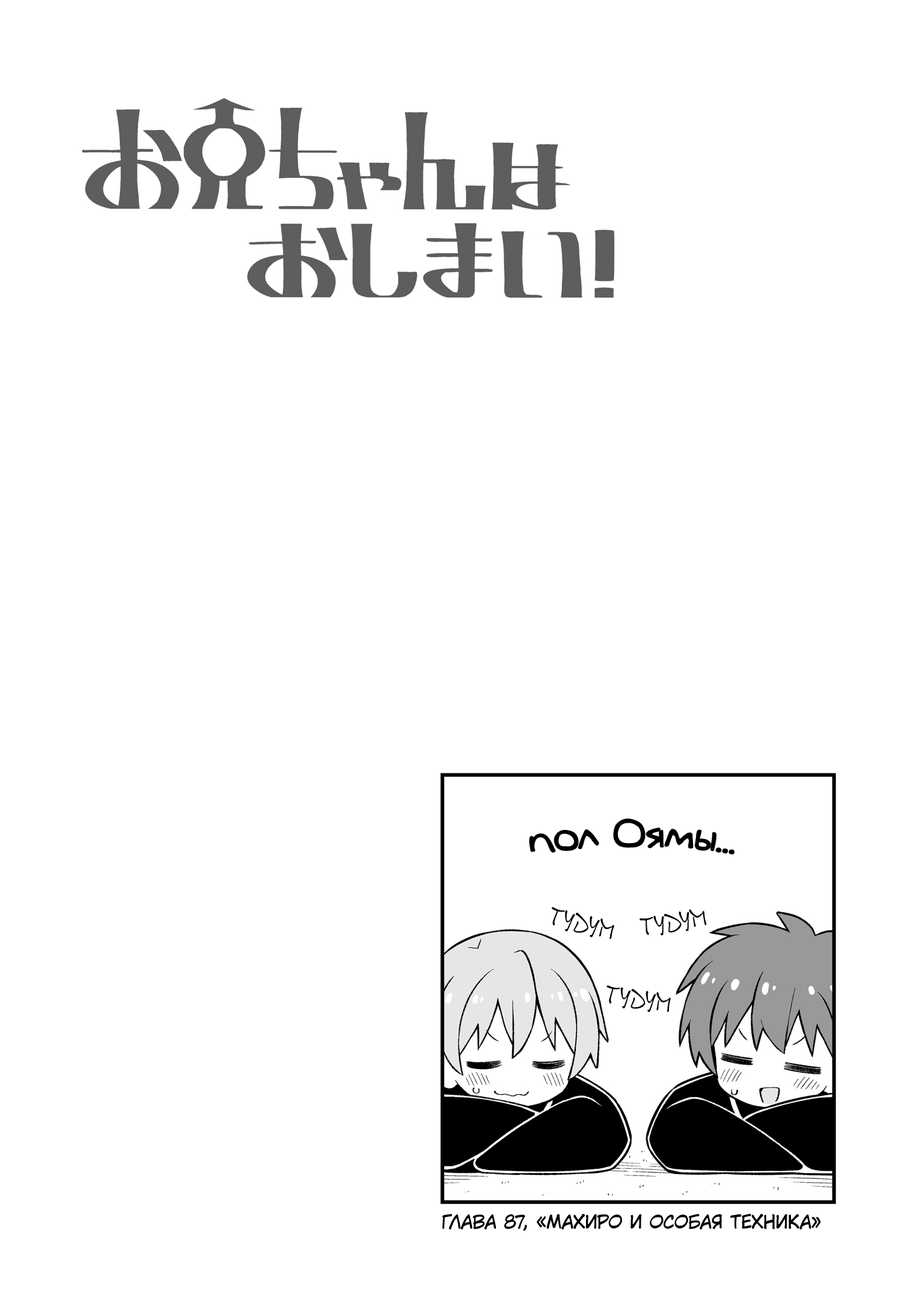
<style>
.page{position:relative;width:919px;height:1298px;background:#ffffff}
.page>*{position:absolute;margin:0}
.t1{font:36.1px "v_Augie";color:#000000}
.t2{font:25.2px "DSNote";color:#000000;scale:0.8 1}
.t3{font:18px "KuraiVoice2";color:#000000;text-transform:uppercase}
</style>
<div class="page">
<p class="t1" style="left:529px;top:819px;width:205px;height:35px">пол Оямы...</p>
<p class="t2" style="left:551px;top:907px;width:63px;height:32px;rotate:13deg">тудум</p>
<p class="t2" style="left:639px;top:909px;width:68px;height:27px;rotate:-10deg">тудум</p>
<p class="t2" style="left:606px;top:985px;width:65px;height:27px;rotate:8deg">тудум</p>
<p class="t3" style="left:442px;top:1214px;width:379px;height:17px">Глава 87, «Махиро и особая техника»</p>
</div>
